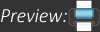
<style>
.page{position:relative;width:100px;height:32px;background:#333333}
.page>*{position:absolute;margin:0}
.t1{font:19.9px "Calibri-LightItalic";color:#ffffff}
</style>
<div class="page">
<p class="t1" style="left:1px;top:9px;width:66px;height:14px">Preview:</p>
</div>
